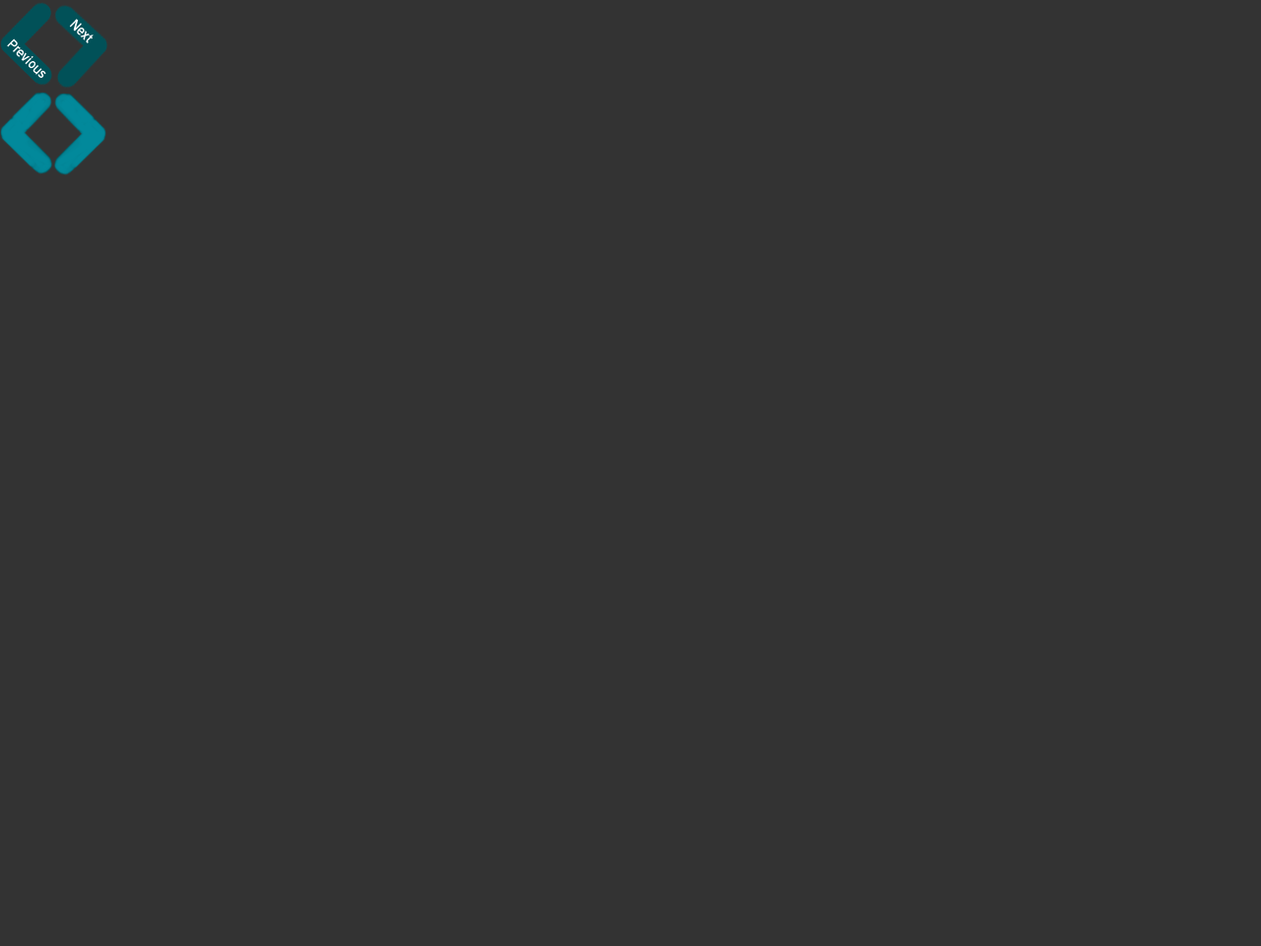
<style>
.page{position:relative;width:1261px;height:946px;background:#333333}
.page>*{position:absolute;margin:0}
.t1{font:17.7px "BlueHighway";color:#ffffff}
</style>
<div class="page">
<p class="t1" style="left:69px;top:19px;width:25px;height:24px;rotate:44deg">Next</p>
<p class="t1" style="left:7px;top:38px;width:39px;height:40px;rotate:44deg">Previous</p>
</div>
